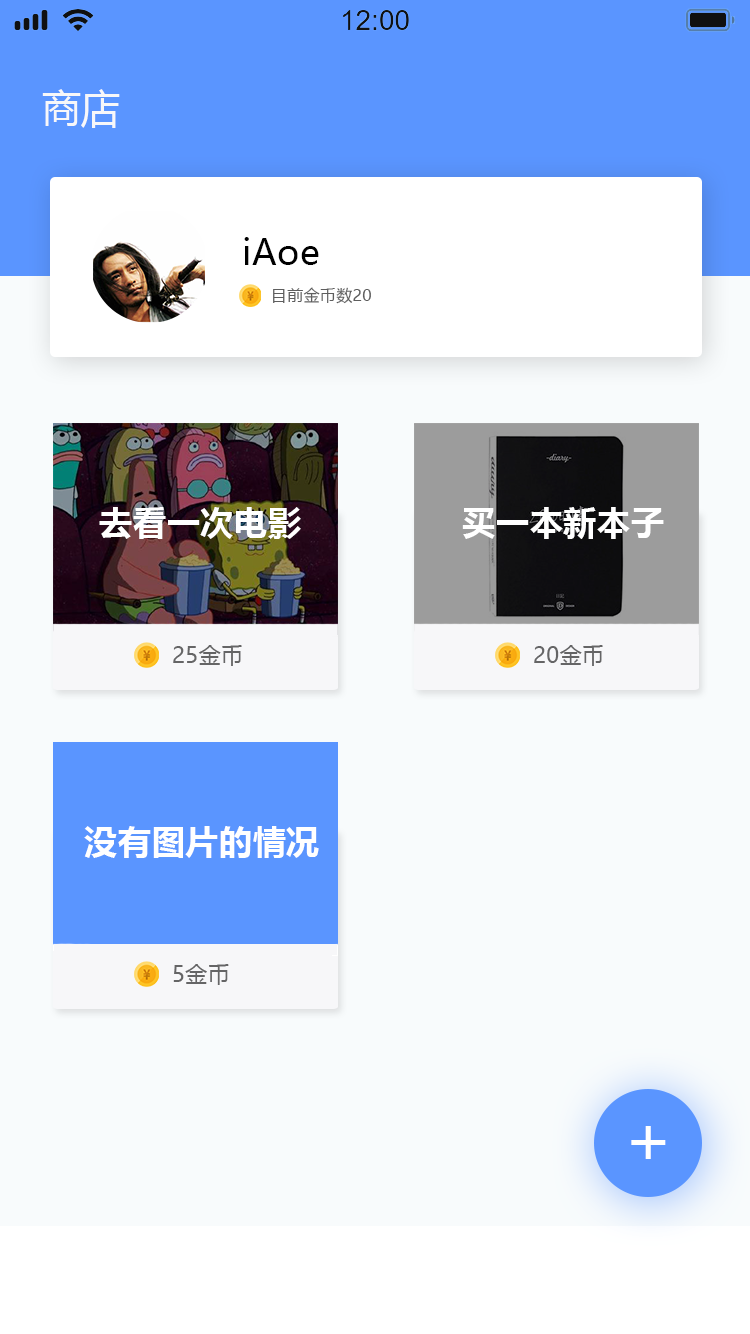
<style>
.page{position:relative;width:750px;height:1334px;background:#f8fbfc}
.page>*{position:absolute;margin:0}
.t1{font:39px "MicrosoftYaHei";letter-spacing:0.02em;color:#f7f7f9}
.t2{font:35px "MicrosoftYaHei";letter-spacing:0.02em;color:#000000}
.t3{font:16px "MicrosoftYaHei";letter-spacing:0.02em;color:#5e5e5e}
.t4{font:33px "MicrosoftYaHei-Bold";letter-spacing:0.02em;color:#ffffff}
.t5{font:22px "MicrosoftYaHei";letter-spacing:0.02em;color:#656566}
</style>
<div class="page">
<p class="t1" style="left:42px;top:89px;width:78px;height:39px">商店</p>
<p class="t2" style="left:244px;top:237px;width:75px;height:28px">iAoe</p>
<p class="t3" style="left:273px;top:287px;width:98px;height:17px">目前金币数20</p>
<p class="t4" style="left:99px;top:507px;width:202px;height:32px">去看一次电影</p>
<p class="t4" style="left:462px;top:507px;width:202px;height:32px">买一本新本子</p>
<p class="t5" style="left:173px;top:645px;width:69px;height:21px">25金币</p>
<p class="t5" style="left:534px;top:645px;width:69px;height:21px">20金币</p>
<p class="t4" style="left:84px;top:826px;width:235px;height:32px">没有图片的情况</p>
<p class="t5" style="left:173px;top:964px;width:56px;height:21px">5金币</p>
</div>
